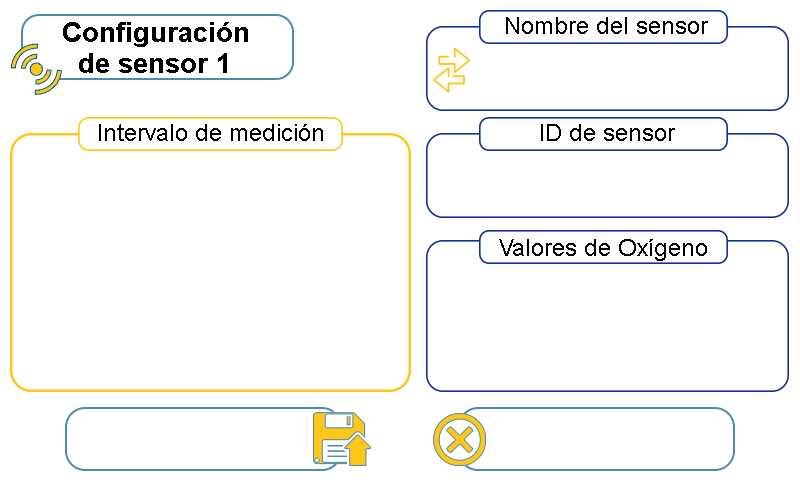
<style>
.page{position:relative;width:800px;height:480px;background:#ffffff}
.page>*{position:absolute;margin:0}
.t1{font:24.4px "ArialMT";color:#000000}
.t2{font:26.7px "Arial-BoldMT";color:#000000}
</style>
<div class="page">
<p class="t1" style="left:506px;top:17px;width:202px;height:17px">Nombre del sensor</p>
<p class="t2" style="left:63px;top:22px;width:185px;height:51px">Configuración <br>  de sensor 1</p>
<p class="t1" style="left:99px;top:124px;width:224px;height:17px">Intervalo de medición</p>
<p class="t1" style="left:541px;top:124px;width:134px;height:17px">ID de sensor</p>
<p class="t1" style="left:499px;top:239px;width:208px;height:22px">Valores de Oxígeno</p>
</div>
